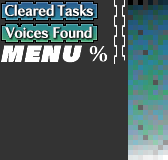
<style>
.page{position:relative;width:168px;height:160px;background:#333333}
.page>*{position:absolute;margin:0}
.t1{font:14px/22px "ChiaroStd-B";letter-spacing:-0.01em;color:#ffffff}
.t2{font:14px/22px "ChiaroStd-B";letter-spacing:-0.01em;color:#ffffff;scale:0.9 1}
</style>
<div class="page">
<p class="t1" style="left:5px;top:4px;width:88px;height:34px;text-align:center"><span class="t2">C</span>leared <span class="t2">T</span>asks<br>Voices Found</p>
</div>
